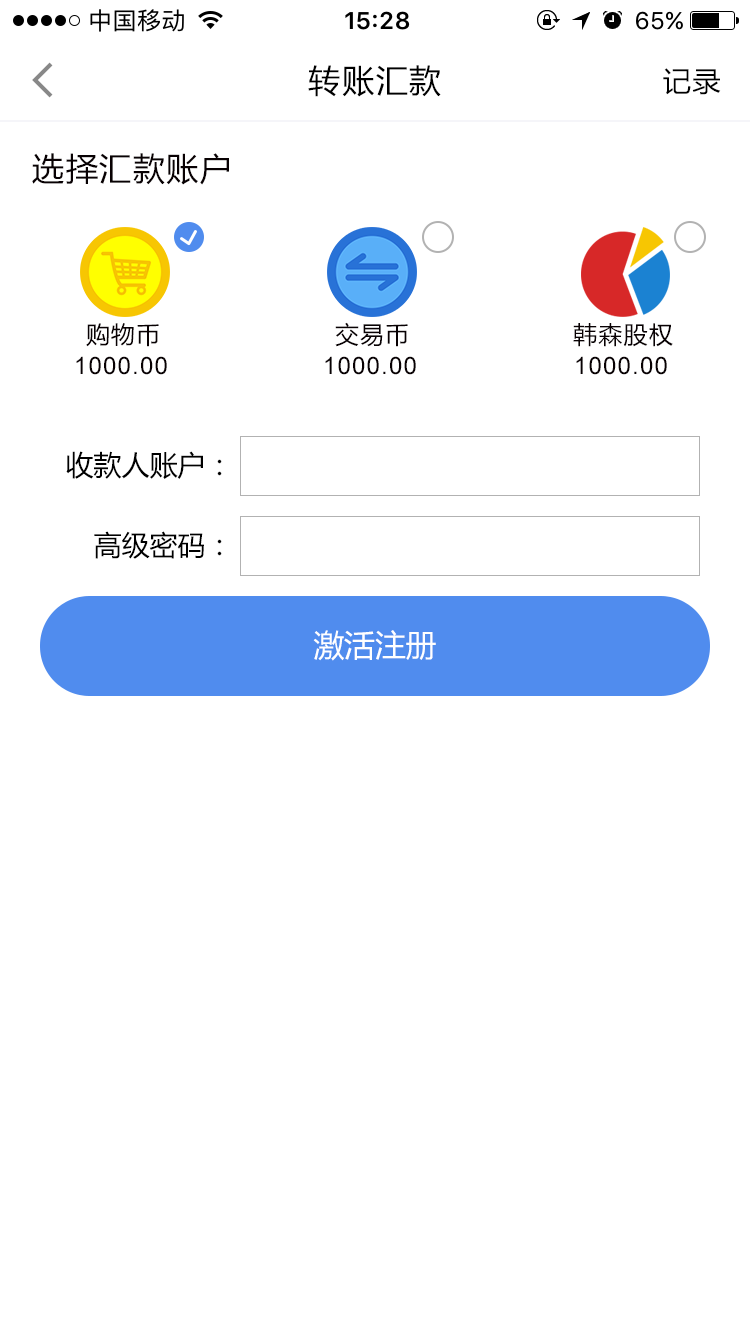
<style>
.page{position:relative;width:750px;height:1334px;background:#ffffff}
.page>*{position:absolute;margin:0}
.t1{font:32px "MicrosoftYaHei";letter-spacing:0.05em;color:#000000}
.t2{font:28px "MicrosoftYaHei";letter-spacing:0.05em;color:#000000}
.t3{font:24px "MicrosoftYaHei";letter-spacing:0.05em;color:#000000}
.t4{font:24px "ArialMT";letter-spacing:0.05em;color:#000000}
.t5{font:28px "MicrosoftYaHei";color:#000000}
.t6{font:30.7px "MicrosoftYaHei";color:#ffffff}
</style>
<div class="page">
<p class="t1" style="left:308px;top:65px;width:133px;height:32px">转账汇款</p>
<p class="t2" style="left:663px;top:68px;width:58px;height:27px">记录</p>
<p class="t1" style="left:32px;top:153px;width:197px;height:32px">选择汇款账户</p>
<p class="t3" style="left:86px;top:323px;width:73px;height:24px">购物币</p>
<p class="t3" style="left:335px;top:322px;width:73px;height:25px">交易币</p>
<p class="t3" style="left:573px;top:323px;width:100px;height:24px">韩森股权</p>
<p class="t4" style="left:76px;top:356px;width:91px;height:19px">1000.00</p>
<p class="t4" style="left:325px;top:356px;width:91px;height:19px">1000.00</p>
<p class="t4" style="left:576px;top:356px;width:91px;height:19px">1000.00</p>
<p class="t5" style="left:66px;top:451px;width:156px;height:28px">收款人账户：</p>
<p class="t5" style="left:94px;top:531px;width:128px;height:28px">高级密码：</p>
<p class="t6" style="left:313px;top:630px;width:123px;height:31px">激活注册</p>
</div>
